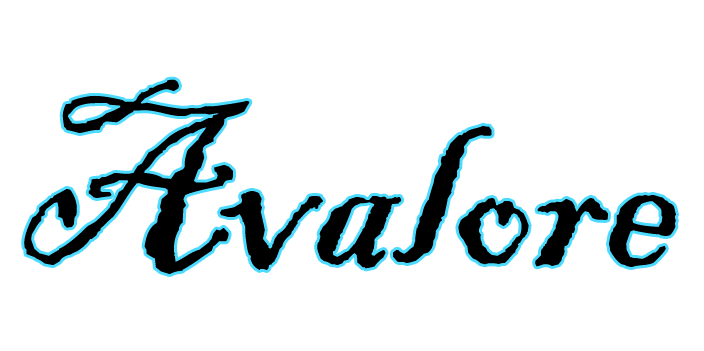
<style>
.page{position:relative;width:704px;height:351px;background:#ffffff}
.page>*{position:absolute;margin:0}
.t1{font:240px "BlackadderITC-Regular";color:#000000}
</style>
<div class="page">
<p class="t1" style="left:24px;top:79px;width:652px;height:195px">Avalore</p>
</div>
